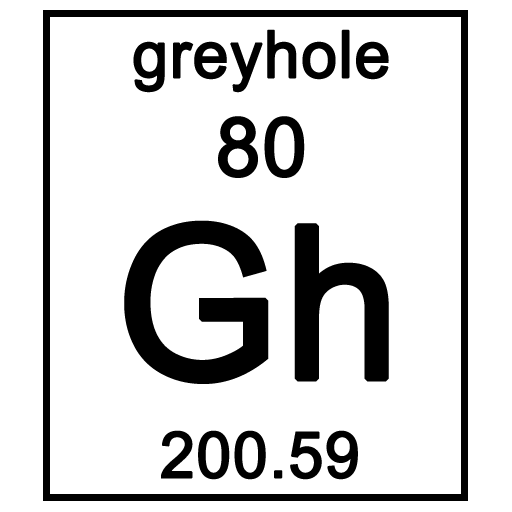
<style>
.page{position:relative;width:512px;height:512px;background:#ffffff}
.page>*{position:absolute;margin:0}
.t1{font:65.3px "ArialMT";color:#000000;font-weight:bold}
.t2{font:81.2px "ArialMT";color:#000000;font-weight:bold}
.t3{font:212.7px "ArialMT";color:#000000;font-weight:bold}
.t4{font:63.7px "ArialMT";color:#000000;font-weight:bold}
</style>
<div class="page">
<p class="t1" style="left:133px;top:29px;width:256px;height:64px">greyhole</p>
<p class="t2" style="left:218px;top:116px;width:87px;height:62px">80</p>
<p class="t3" style="left:124px;top:220px;width:265px;height:164px">Gh</p>
<p class="t4" style="left:161px;top:430px;width:197px;height:50px">200.59</p>
</div>
